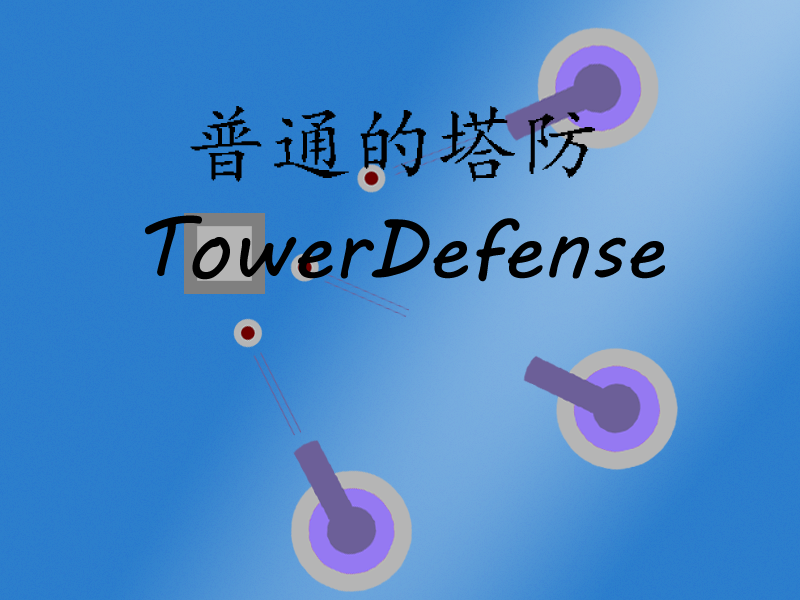
<style>
.page{position:relative;width:800px;height:600px;background:#2c7fcc}
.page>*{position:absolute;margin:0}
.t1{font:83.7px "¿¬Ìå";color:#000000}
.t2{font:83.8px "MVBoli";color:#000000}
</style>
<div class="page">
<p class="t1" style="left:190px;top:106px;width:405px;height:76px">普通的塔防</p>
<p class="t2" style="left:145px;top:215px;width:520px;height:67px">TowerDefense</p>
</div>
